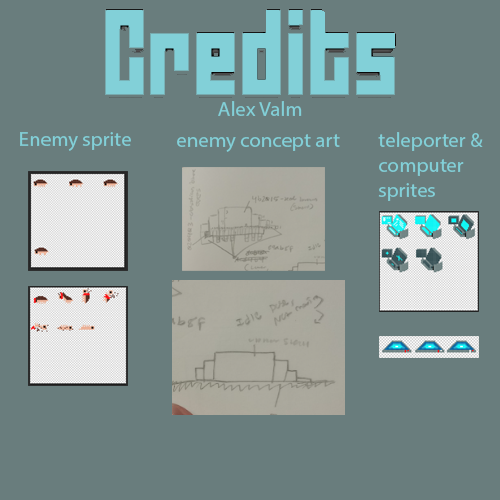
<style>
.page{position:relative;width:500px;height:500px;background:#697d7d}
.page>*{position:absolute;margin:0}
.t1{font:20.8px "MyriadPro-Regular";color:#82d0d8}
</style>
<div class="page">
<p class="t1" style="left:218px;top:101px;width:84px;height:15px">Alex Valm</p>
<p class="t1" style="left:20px;top:132px;width:111px;height:19px">Enemy sprite</p>
<p class="t1" style="left:177px;top:134px;width:163px;height:18px">enemy concept art</p>
<p class="t1" style="left:378px;top:132px;width:105px;height:69px">teleporter &amp; computer sprites</p>
</div>
